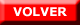
<style>
.page{position:relative;width:80px;height:25px;background:#ff0000}
.page>*{position:absolute;margin:0}
.t1{font:12px "Verdana-Bold";color:#ffffff}
</style>
<div class="page">
<p class="t1" style="left:13px;top:7px;width:54px;height:10px">VOLVER</p>
</div>
